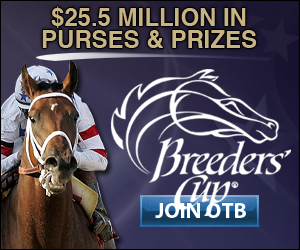
<style>
.page{position:relative;width:300px;height:250px}
.page>*{position:absolute;margin:0}
.t1{font:24px/22px "Helvetica-Bold";color:#c8b385}
.t2{font:22px "Myriad-Bold";color:#ffffff}
</style>
<div class="page">
<p class="t1" style="left:42px;top:6px;width:215px;height:42px;text-align:center">$25.5 MILLION IN<br>PURSES &amp; PRIZES</p>
<p class="t2" style="left:155px;top:203px;width:91px;height:15px">JOIN OTB</p>
</div>
